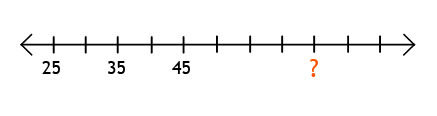
<style>
.page{position:relative;width:437px;height:116px;background:#ffffff}
.page>*{position:absolute;margin:0}
.t1{font:18px "TrebuchetMS";color:#000000}
.t2{font:25px "TrebuchetMS";color:#ff5400}
</style>
<div class="page">
<p class="t1" style="left:42px;top:61px;width:18px;height:13px">25</p>
<p class="t1" style="left:108px;top:61px;width:17px;height:13px">35</p>
<p class="t1" style="left:172px;top:61px;width:18px;height:13px">45</p>
<p class="t2" style="left:310px;top:59px;width:8px;height:18px">?</p>
</div>
